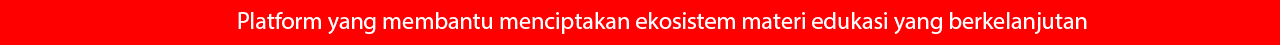
<style>
.page{position:relative;width:1280px;height:45px;background:#ff0000}
.page>*{position:absolute;margin:0}
.t1{font:24px "MyriadPro-Regular";color:#ffffff}
</style>
<div class="page">
<p class="t1" style="left:238px;top:12px;width:849px;height:22px">Platform yang membantu menciptakan ekosistem materi edukasi yang berkelanjutan</p>
</div>
